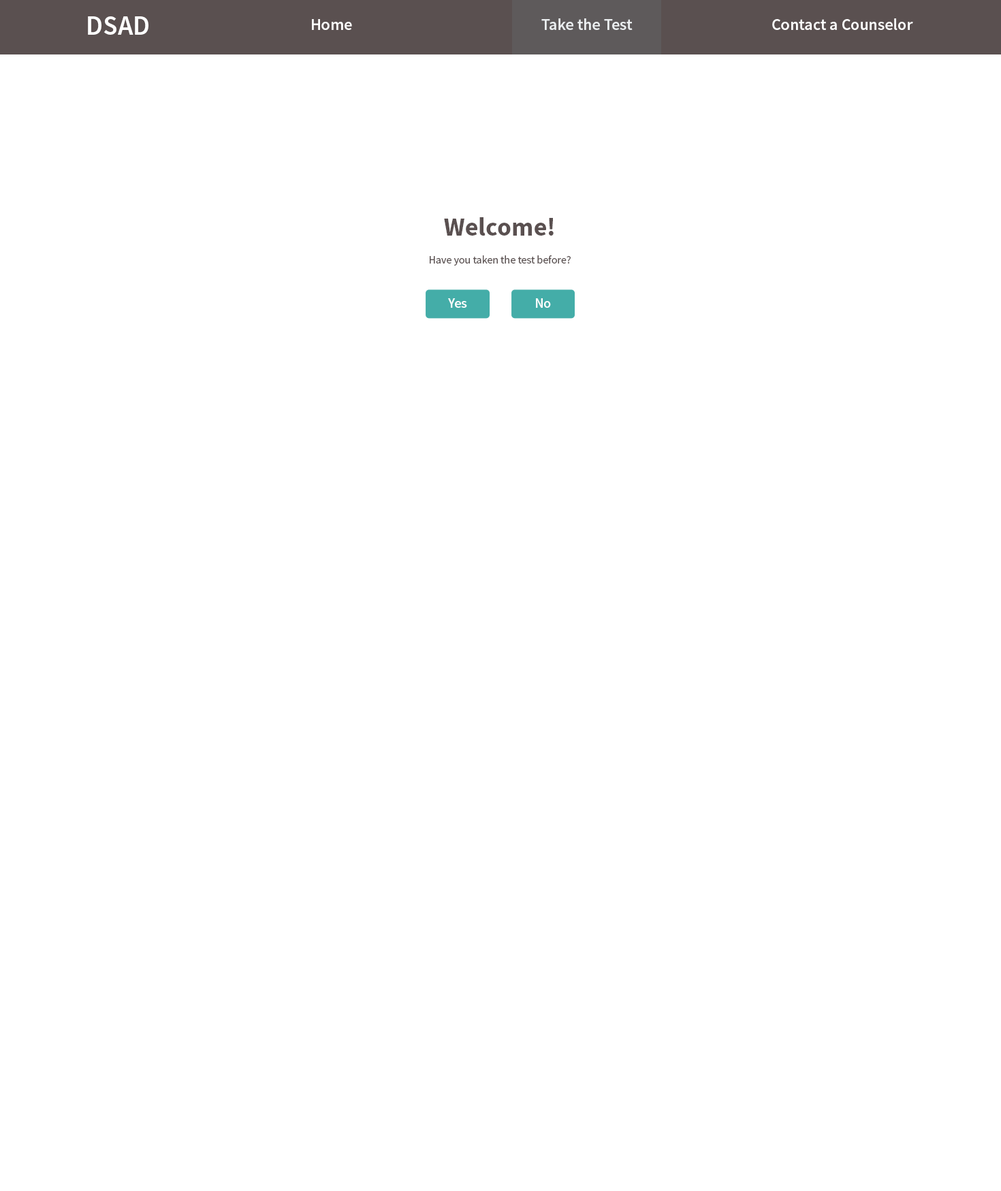
<style>
.page{position:relative;width:1001px;height:1191px;background:#ffffff}
.page>*{position:absolute;margin:0}
.t1{font:27.2px "SourceSansPro-Semibold";color:#ffffff}
.t2{font:16.3px "SourceSansPro-Semibold";color:#ffffff}
.t3{font:10.9px "SourceSansPro-Regular";color:#5a5050}
.t4{font:25.9px/32.7px "SourceSansPro-Bold";color:#5a5050}
.t5{font:13.6px "SourceSansPro-Semibold";color:#ffffff}
</style>
<div class="page">
<p class="t1" style="left:88px;top:16px;width:60px;height:19px">DSAD</p>
<p class="t2" style="left:312px;top:19px;width:40px;height:11px">Home</p>
<p class="t2" style="left:541px;top:18px;width:92px;height:12px">Take the Test</p>
<p class="t2" style="left:772px;top:18px;width:141px;height:12px">Contact a Counselor</p>
<p class="t3" style="left:430px;top:217px;width:141px;height:49px;text-align:center"><span class="t4">Welcome!<br></span>Have you taken the test before?</p>
<p class="t5" style="left:448px;top:298px;width:19px;height:10px">Yes</p>
<p class="t5" style="left:536px;top:298px;width:15px;height:10px">No</p>
</div>
